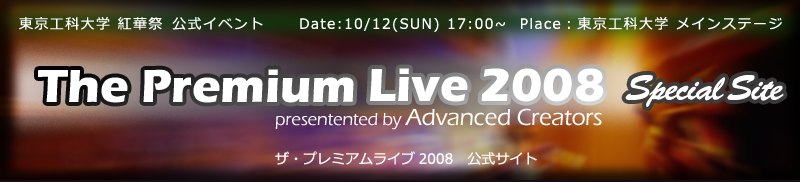
<style>
.page{position:relative;width:800px;height:182px}
.page>*{position:absolute;margin:0}
.t1{font:14px "Meiryo";letter-spacing:0.1em;color:#ffffff}
.t2{font:48px "ErasITC-Bold";color:#ffffff}
.t3{font:36px "BrushScrD";letter-spacing:-0.05em;color:#ffffff}
.t4{font:24px "ErasITC-Medium";letter-spacing:-0.015em;color:#ffffff}
.t5{font:18px "ErasITC-Medium";letter-spacing:-0.015em;color:#ffffff}
.t6{font:14px "Meiryo";color:#ffffff}
</style>
<div class="page">
<p class="t1" style="left:19px;top:17px;width:244px;height:13px">東京工科大学 紅華祭 公式イベント</p>
<p class="t1" style="left:300px;top:17px;width:482px;height:15px">Date:10/12(SUN) 17:00~  Place：東京工科大学 メインステージ</p>
<p class="t2" style="left:38px;top:68px;width:566px;height:35px">The Premium Live 2008</p>
<p class="t3" style="left:625px;top:75px;width:159px;height:32px">Special Site</p>
<p class="t4" style="left:275px;top:108px;width:327px;height:22px"><span class="t5">presentented by </span>Advanced Creators</p>
<p class="t6" style="left:275px;top:151px;width:262px;height:14px">ザ・プレミアムライブ2008 公式サイト</p>
</div>
